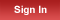
<style>
.page{position:relative;width:60px;height:20px}
.page>*{position:absolute;margin:0}
.t1{font:10px "Arial-BoldMT";color:#ffffff}
</style>
<div class="page">
<p class="t1" style="left:14px;top:5px;width:33px;height:10px">Sign In</p>
</div>
